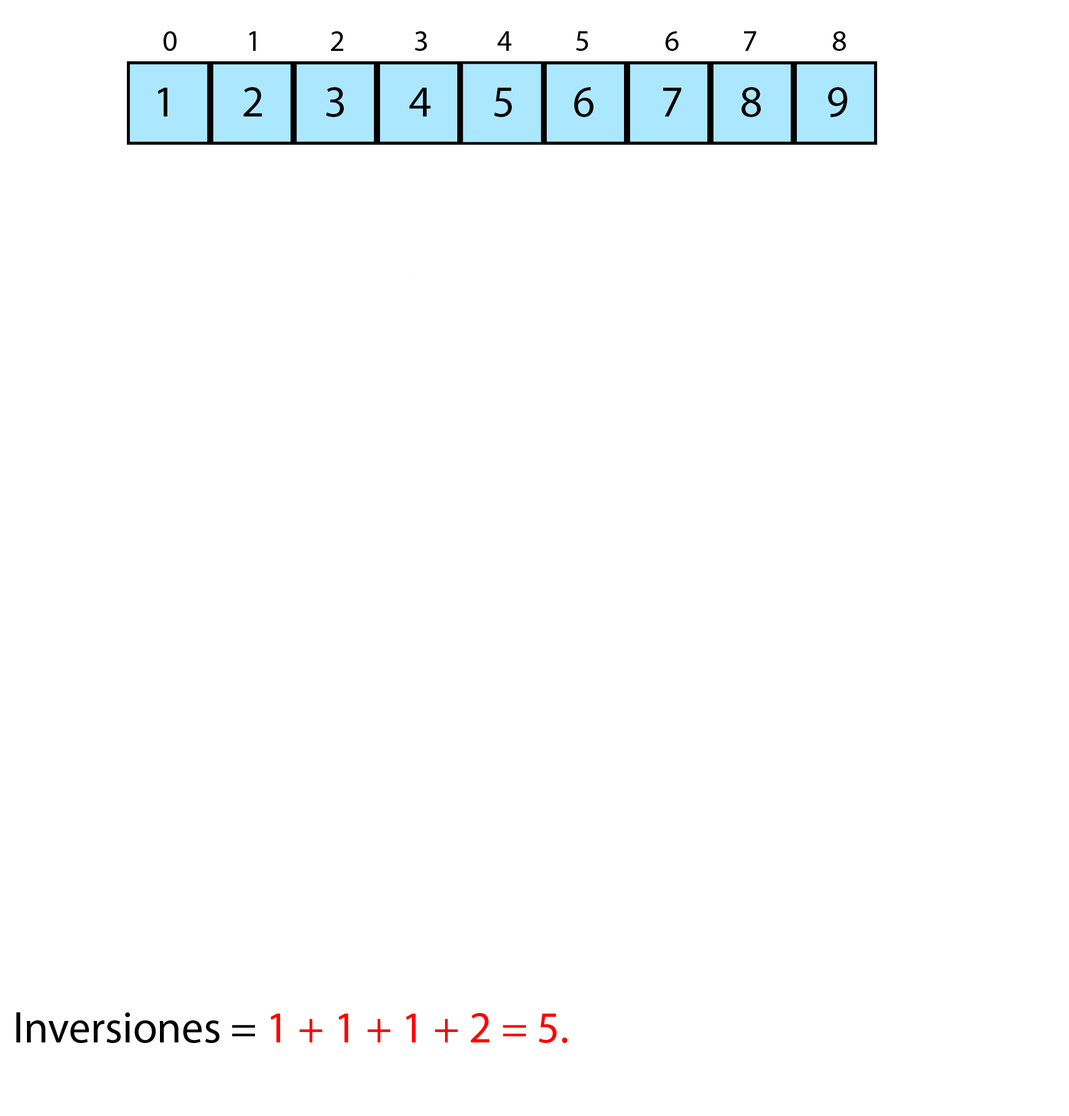
<style>
.page{position:relative;width:1069px;height:1116px;background:#ffffff}
.page>*{position:absolute;margin:0}
.t1{font:44.1px "MyriadPro-Regular";color:#000000}
.t2{font:44.1px "MyriadPro-Regular";color:#ff0000}
</style>
<div class="page">
<p class="t1" style="left:158px;top:88px;width:9px;height:28px">1</p>
<p class="t1" style="left:243px;top:87px;width:19px;height:29px">2</p>
<p class="t1" style="left:325px;top:87px;width:19px;height:30px">3</p>
<p class="t1" style="left:409px;top:88px;width:22px;height:28px">4</p>
<p class="t1" style="left:494px;top:88px;width:18px;height:29px">5</p>
<p class="t1" style="left:574px;top:87px;width:20px;height:30px">6</p>
<p class="t1" style="left:663px;top:88px;width:19px;height:28px">7</p>
<p class="t1" style="left:741px;top:87px;width:20px;height:30px">8</p>
<p class="t1" style="left:828px;top:87px;width:20px;height:30px">9</p>
<p class="t2" style="left:16px;top:1012px;width:552px;height:31px"><span class="t1">Inversiones = </span>1 + 1 + 1 + 2 = 5.</p>
</div>
